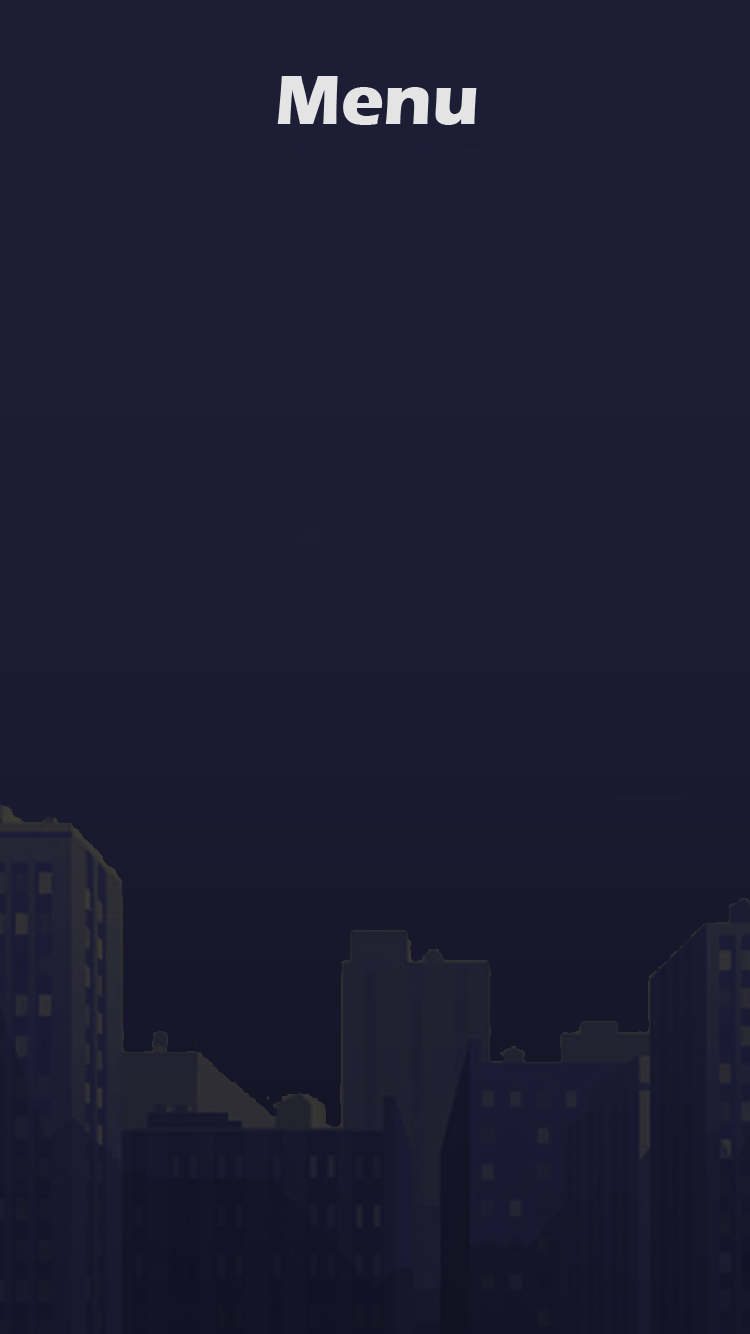
<style>
.page{position:relative;width:750px;height:1334px}
.page>*{position:absolute;margin:0}
.t1{font:72px "ErasITC-Bold";color:#e4e4e5}
</style>
<div class="page">
<p class="t1" style="left:277px;top:76px;width:200px;height:49px">Menu</p>
</div>
